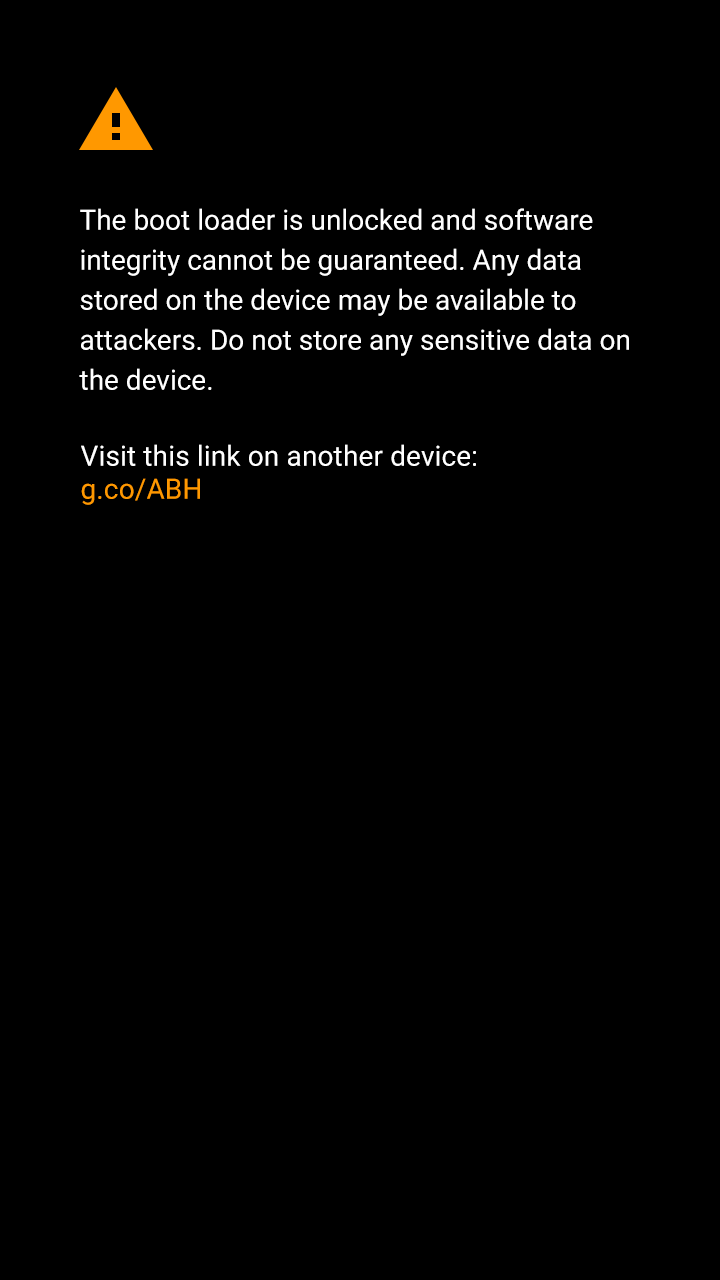
<style>
.page{position:relative;width:720px;height:1280px;background:#000000}
.page>*{position:absolute;margin:0}
.t1{font:28px/40px "Roboto-Regular";color:#ffffff}
.t2{font:28px/40px "Roboto-Regular";letter-spacing:0.005em;color:#ffffff}
.t3{font:28px/33px "Roboto-Regular";letter-spacing:0.005em;color:#ff9800}
</style>
<div class="page">
<p class="t1" style="left:79px;top:208px;width:550px;height:182px">The boot loader is unlocked and software integrity cannot be guaranteed. Any data stored on the device may be available to attackers. Do not store any sensitive data on the device.</p>
<p class="t2" style="left:81px;top:444px;width:395px;height:61px">Visit this link on another device:<br><span class="t3">g.co/ABH</span></p>
</div>
